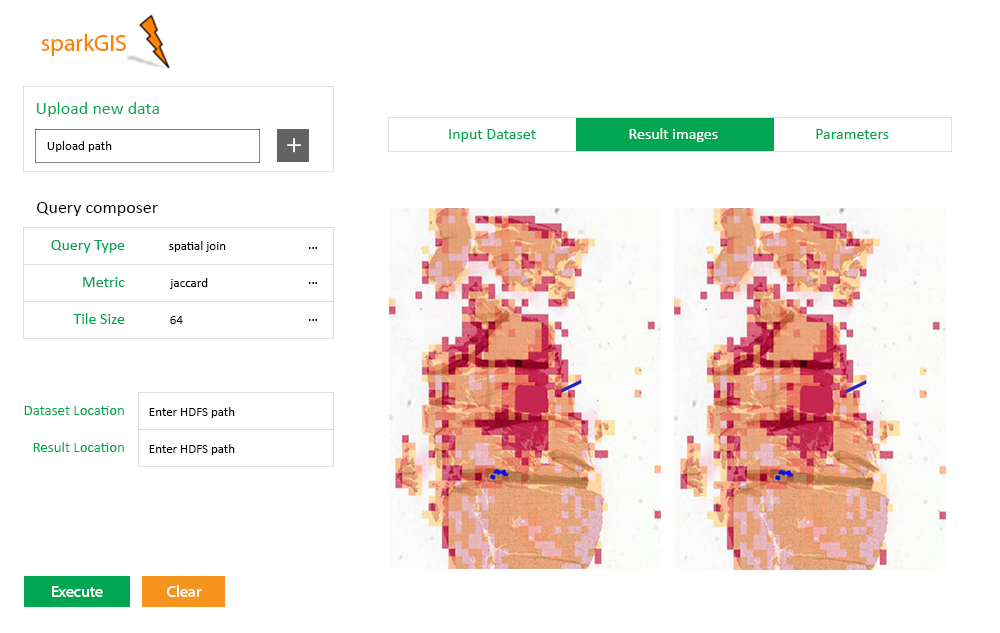
<style>
.page{position:relative;width:1000px;height:633px;background:#ffffff}
.page>*{position:absolute;margin:0}
.t1{font:23.6px "MyriadHebrew-Regular";color:#fe8000}
.t2{font:18px "Calibri";color:#00a651}
.t3{font:16px "Calibri";color:#00a651}
.t4{font:16px "Calibri";color:#ffffff}
.t5{font:13px "Calibri";color:#000000}
.t6{font:26px "MyriadHebrew-Regular";color:#ffffff}
.t7{font:18px "Calibri";color:#000000}
.t8{font:14px "MyriadHebrew-Regular";color:#000000}
.t9{font:15px "Calibri";color:#00a651}
.t10{font:16px "MyriadHebrew-Regular";color:#ffffff}
</style>
<div class="page">
<p class="t1" style="left:41px;top:34px;width:85px;height:22px">sparkGIS</p>
<p class="t2" style="left:36px;top:102px;width:123px;height:15px">Upload new data</p>
<p class="t3" style="left:449px;top:129px;width:87px;height:13px">Input Dataset</p>
<p class="t4" style="left:629px;top:128px;width:89px;height:14px">Result images</p>
<p class="t3" style="left:816px;top:129px;width:73px;height:10px">Parameters</p>
<p class="t5" style="left:47px;top:141px;width:65px;height:11px">Upload path</p>
<p class="t6" style="left:287px;top:138px;width:14px;height:15px">+</p>
<p class="t7" style="left:37px;top:202px;width:121px;height:14px">Query composer</p>
<p class="t3" style="left:51px;top:240px;width:74px;height:13px">Query Type</p>
<p class="t5" style="left:169px;top:241px;width:57px;height:11px">spatial join</p>
<p class="t8" style="left:308px;top:247px;width:10px;height:2px">...</p>
<p class="t3" style="left:83px;top:277px;width:42px;height:10px">Metric</p>
<p class="t5" style="left:169px;top:278px;width:39px;height:11px">jaccard</p>
<p class="t8" style="left:308px;top:282px;width:10px;height:2px">...</p>
<p class="t3" style="left:73px;top:313px;width:52px;height:11px">Tile Size</p>
<p class="t5" style="left:170px;top:316px;width:13px;height:8px">64</p>
<p class="t8" style="left:308px;top:319px;width:10px;height:2px">...</p>
<p class="t9" style="left:24px;top:406px;width:100px;height:9px">Dataset Location</p>
<p class="t5" style="left:149px;top:407px;width:86px;height:11px">Enter HDFS path</p>
<p class="t9" style="left:33px;top:442px;width:91px;height:10px">Result Location</p>
<p class="t5" style="left:149px;top:444px;width:86px;height:11px">Enter HDFS path</p>
<p class="t10" style="left:52px;top:586px;width:51px;height:11px">Execute</p>
<p class="t10" style="left:167px;top:585px;width:35px;height:12px">Clear</p>
</div>
